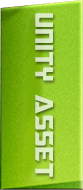
<style>
.page{position:relative;width:83px;height:190px}
.page>*{position:absolute;margin:0}
.t1{font:25.2px "Megatron";color:#daecc1}
</style>
<div class="page">
<p class="t1" style="left:35px;top:13px;width:18px;height:164px;rotate:90deg">Unity Asset</p>
</div>
